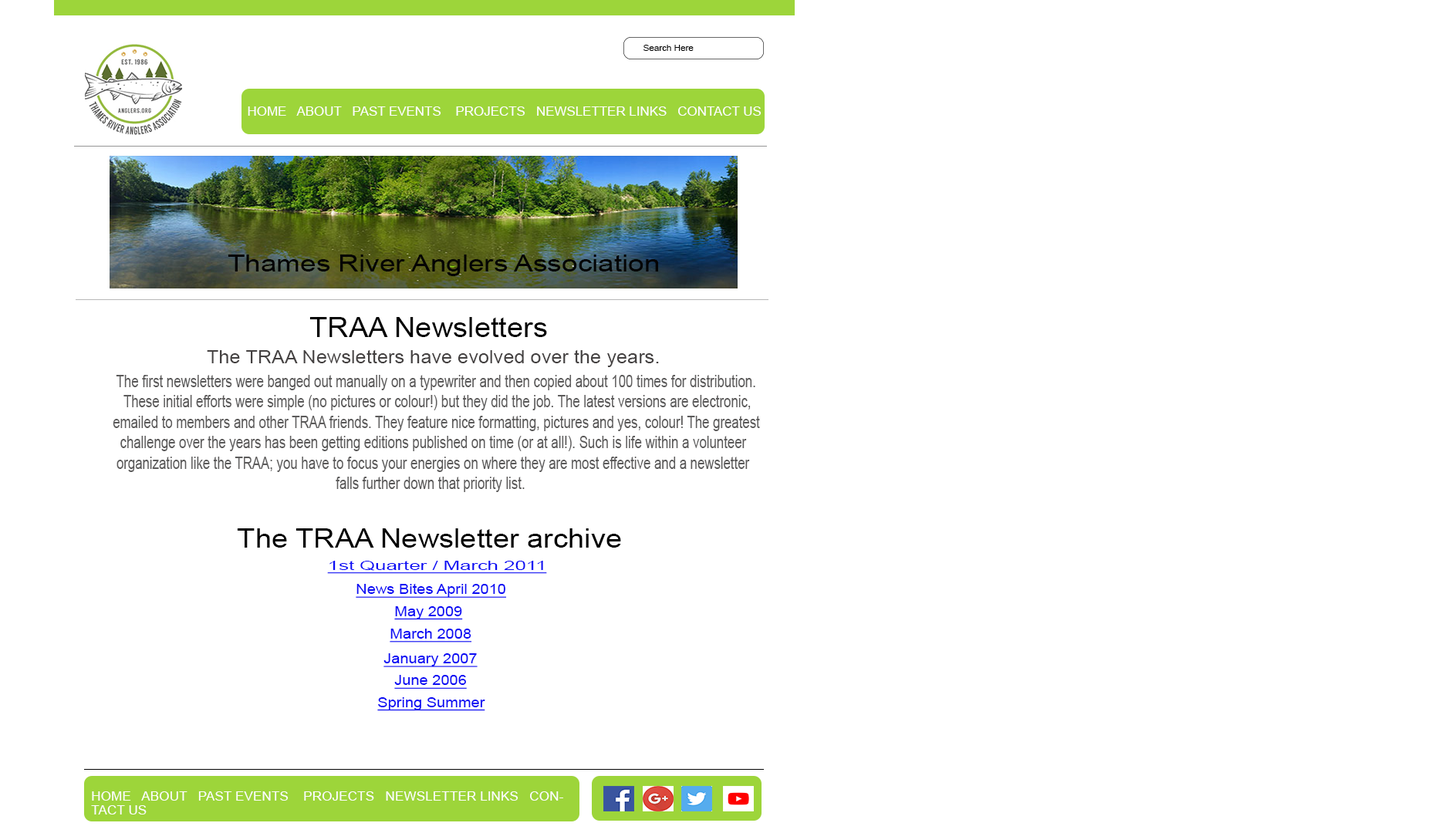
<style>
.page{position:relative;width:1432px;height:833px;background:#ffffff}
.page>*{position:absolute;margin:0}
.t1{font:8.2px "ArialMT";color:#040404;scale:1.09 1}
.t2{font:13.5px "ArialMT";color:#040404;scale:1.09 1}
.t3{font:12px "ArialMT";color:#fefdfd;scale:1.08 1}
.t4{font:23.1px "ArialMT";color:#040404;scale:1.23 1}
.t5{font:27.8px "ArialMT";color:#000000;scale:1.06 1}
.t6{font:18.5px "ArialMT";color:#444141;scale:1.06 1}
.t7{font:17px "ArialMT";color:#5c5b5b;scale:0.76 1}
.t8{font:26.1px "ArialMT";color:#000000;scale:1.12 1}
.t9{font:11.6px "ArialMT";color:#000000;scale:1.12 1}
.t10{font:12.3px "ArialMT";color:#0b0bf4;text-decoration:underline;scale:1.61 1}
.t11{font:13.7px "ArialMT";color:#0b0bf4;text-decoration:underline;scale:1.12 1}
.t12{font:12px "ArialMT";color:#fefdfd;scale:1.1 1}
</style>
<div class="page">
<p class="t1" style="left:643px;top:45px;width:50px;height:6px"><span class="t2">  </span>  Search Here</p>
<p class="t3" style="left:248px;top:106px;width:513px;height:10px">HOME   ABOUT   PAST EVENTS    PROJECTS   NEWSLETTER LINKS   CONTACT US</p>
<p class="t4" style="left:228px;top:255px;width:430px;height:21px">Thames River Anglers Association</p>
<p class="t5" style="left:309px;top:317px;width:238px;height:20px">TRAA Newsletters</p>
<p class="t6" style="left:207px;top:349px;width:452px;height:18px">The TRAA Newsletters have evolved over the years.</p>
<p class="t7" style="left:113px;top:375px;width:647px;height:117px">The first newsletters were banged out manually on a typewriter and then copied about 100 times for distribution. <br>    These initial efforts were simple (no pictures or colour!) but they did the job. The latest versions are electronic, <br> emailed to members and other TRAA friends. They feature nice formatting, pictures and yes, colour! The greatest <br>   challenge over the years has been getting editions published on time (or at all!). Such is life within a volunteer <br>  organization like the TRAA; you have to focus your energies on where they are most effective and a newsletter <br>                                                               falls further down that priority list.</p>
<p class="t8" style="left:237px;top:528px;width:384px;height:20px"><span class="t9">                             </span> The TRAA Newsletter archive</p>
<p class="t10" style="left:327px;top:561px;width:220px;height:13px">1st Quarter / March 2011</p>
<p class="t11" style="left:356px;top:583px;width:150px;height:15px">News Bites April 2010</p>
<p class="t11" style="left:394px;top:606px;width:69px;height:14px">May 2009</p>
<p class="t11" style="left:389px;top:629px;width:83px;height:13px">March 2008</p>
<p class="t11" style="left:383px;top:653px;width:94px;height:14px">January 2007</p>
<p class="t11" style="left:394px;top:675px;width:73px;height:14px">June 2006</p>
<p class="t11" style="left:377px;top:697px;width:108px;height:14px">Spring Summer</p>
<p class="t12" style="left:91px;top:791px;width:472px;height:23px">HOME   ABOUT   PAST EVENTS    PROJECTS   NEWSLETTER LINKS   CONTACT US</p>
</div>
